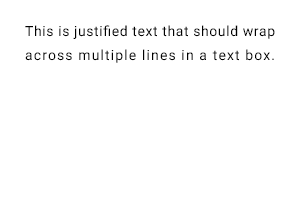
<style>
.page{position:relative;width:300px;height:200px;background:#ffffff}
.page>*{position:absolute;margin:0}
.t1{font:14px "Roboto-Regular";color:#000000}
</style>
<div class="page">
<p class="t1" style="left:25px;top:25px;width:250px;height:38px;text-align:justify">This is justified text that should wrap across multiple lines in a text box.</p>
</div>
